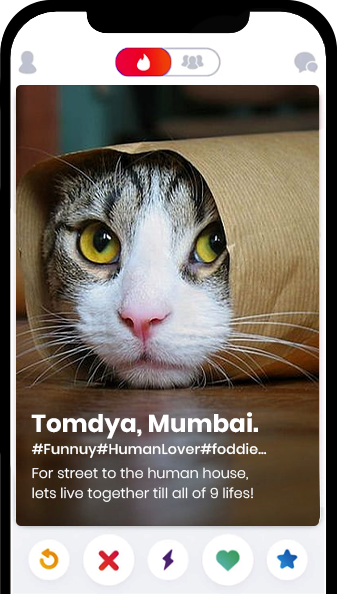
<style>
.page{position:relative;width:337px;height:594px}
.page>*{position:absolute;margin:0}
.t1{font:24.4px "Poppins-Bold";color:#ffffff}
.t2{font:14px "Poppins-Medium";letter-spacing:0.01em;color:#ffffff}
.t3{font:14px/20.8px "Poppins-Light";letter-spacing:0.01em;color:#ffffff}
</style>
<div class="page">
<p class="t1" style="left:31px;top:412px;width:227px;height:27px">Tomdya, Mumbai.</p>
<p class="t2" style="left:31px;top:443px;width:236px;height:15px">#Funnuy#HumanLover#foddie...</p>
<p class="t3" style="left:32px;top:467px;width:221px;height:35px">For street to the human house,<br>lets live together till all of 9 lifes!</p>
</div>
